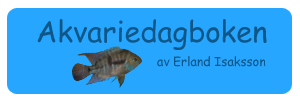
<style>
.page{position:relative;width:300px;height:100px;background:#26a6ff}
.page>*{position:absolute;margin:0}
.t1{font:29.2px "ComicSansMS";color:#0f5789}
.t2{font:12.5px "ComicSansMS";color:#0f5789}
</style>
<div class="page">
<p class="t1" style="left:37px;top:19px;width:230px;height:31px">Akvariedagboken</p>
<p class="t2" style="left:157px;top:56px;width:109px;height:11px">av Erland Isaksson</p>
</div>
